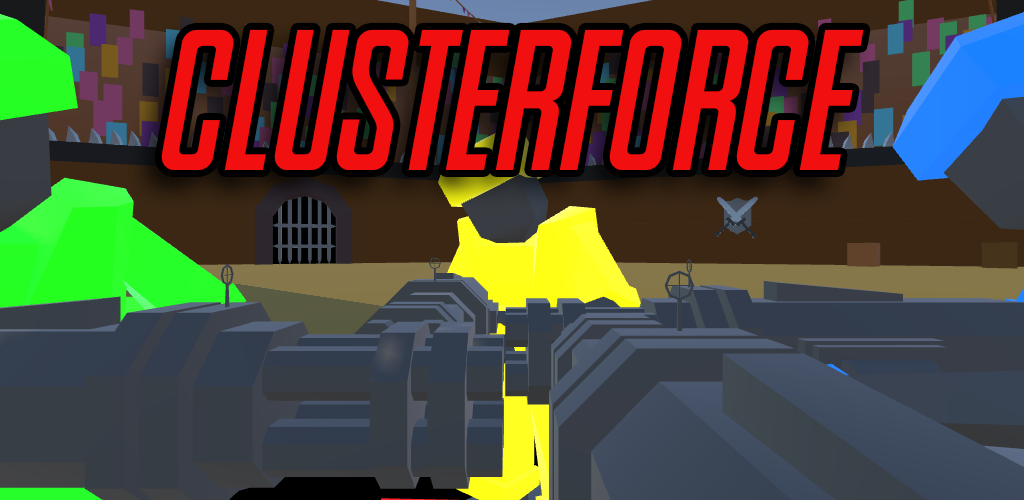
<style>
.page{position:relative;width:1024px;height:500px}
.page>*{position:absolute;margin:0}
.t1{font:200px "SNES-Italic";color:#f10f0f}
</style>
<div class="page">
<p class="t1" style="left:161px;top:29px;width:703px;height:141px">Clusterforce</p>
</div>
